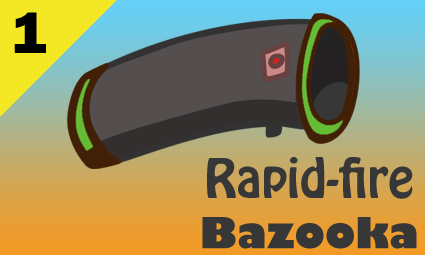
<style>
.page{position:relative;width:425px;height:255px}
.page>*{position:absolute;margin:0}
.t1{font:60px "FranklinGothic-Heavy";color:#000000}
.t2{font:48px "HoboStd";color:#373737}
.t3{font:42px "GillSans-UltraBold";color:#373737}
</style>
<div class="page">
<p class="t1" style="left:14px;top:12px;width:32px;height:41px">1</p>
<p class="t2" style="left:202px;top:157px;width:215px;height:92px;text-align:center">Rapid-fire<br><span class="t3">Bazooka</span></p>
</div>
